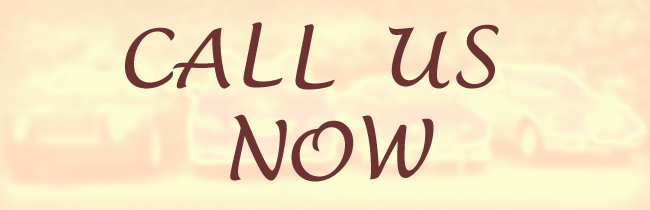
<style>
.page{position:relative;width:650px;height:210px}
.page>*{position:absolute;margin:0}
.t1{font:80px "LucidaHandwriting-Italic";color:#6f3232}
</style>
<div class="page">
<p class="t1" style="left:125px;top:27px;width:50px;height:62px">C</p>
<p class="t1" style="left:172px;top:27px;width:59px;height:62px">A</p>
<p class="t1" style="left:243px;top:22px;width:40px;height:66px">L</p>
<p class="t1" style="left:295px;top:24px;width:40px;height:66px">L</p>
<p class="t1" style="left:388px;top:26px;width:62px;height:63px">U</p>
<p class="t1" style="left:456px;top:24px;width:43px;height:65px">S</p>
<p class="t1" style="left:230px;top:114px;width:57px;height:67px">N</p>
<p class="t1" style="left:291px;top:120px;width:63px;height:62px">O</p>
<p class="t1" style="left:362px;top:115px;width:72px;height:65px">W</p>
</div>
